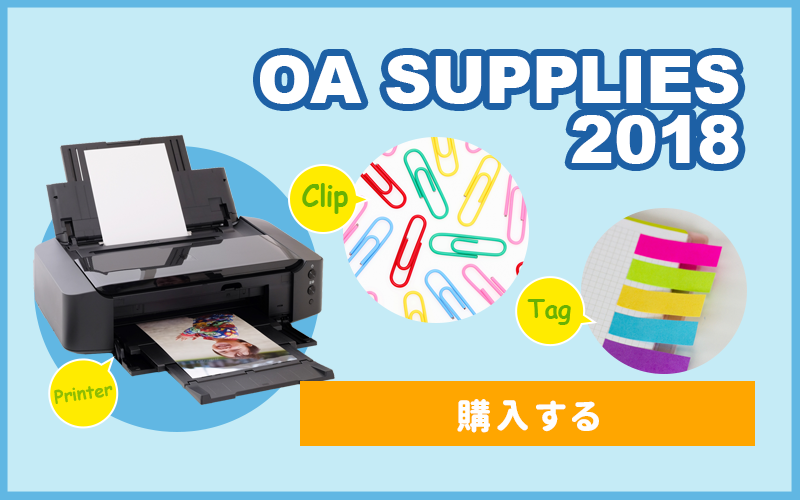
<style>
.page{position:relative;width:800px;height:500px;background:#c5ebf6}
.page>*{position:absolute;margin:0}
.t1{font:66.3px/59.9px "Arial-Black";color:#ffffff}
.t2{font:28.7px "ComicSansMS-Bold";color:#68b104}
.t3{font:24.6px "ComicSansMS-Bold";color:#68b104}
.t4{font:18.2px "ComicSansMS-Bold";color:#8ebd03}
.t5{font:35px "GenJyuuGothicX-P-Heavy";letter-spacing:0.1em;color:#fefefe}
</style>
<div class="page">
<p class="t1" style="left:260px;top:55px;width:479px;height:109px;text-align:right">OA SUPPLIES<br>2018</p>
<p class="t2" style="left:302px;top:183px;width:46px;height:31px">Clip</p>
<p class="t3" style="left:527px;top:299px;width:44px;height:26px">Tag</p>
<p class="t4" style="left:54px;top:385px;width:59px;height:19px;rotate:-8deg">Printer</p>
<p class="t5" style="left:457px;top:399px;width:142px;height:34px">購入する</p>
</div>
